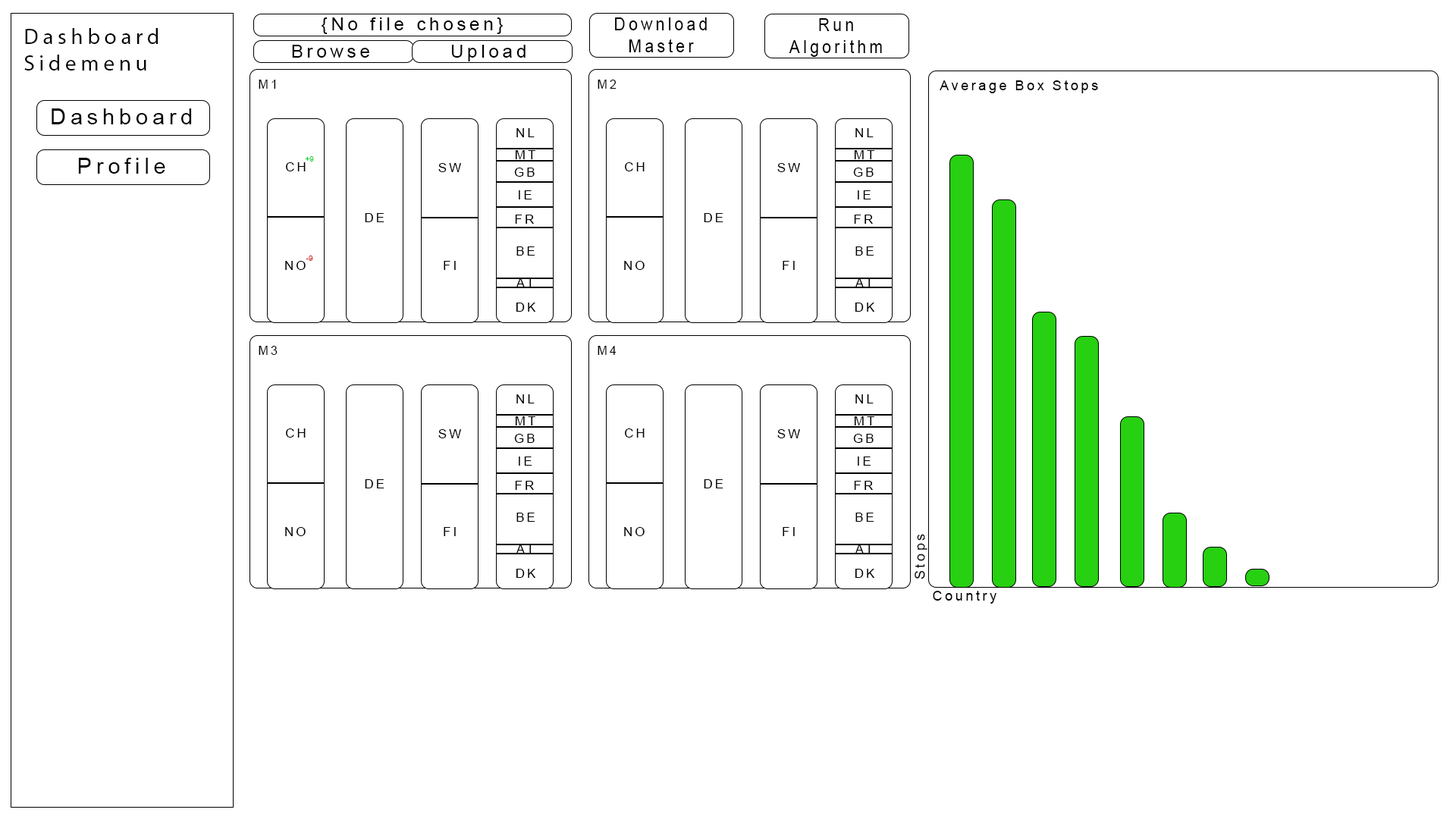
<style>
.page{position:relative;width:1456px;height:819px;background:#ffffff}
.page>*{position:absolute;margin:0}
.t1{font:18.2px "ArialMT";letter-spacing:0.2em;color:#000000}
.t2{font:18.2px "ArialMT";letter-spacing:0.2em;color:#000000;scale:0.88 1}
.t3{font:22px "MyriadPro-Regular";letter-spacing:0.2em;color:#000000}
.t4{font:12.2px "ArialMT";letter-spacing:0.2em;color:#000000}
.t5{font:13.6px "ArialMT";letter-spacing:0.2em;color:#000000}
.t6{font:22px "ArialMT";letter-spacing:0.2em;color:#000000}
.t7{font:12.7px "ArialMT";letter-spacing:0.2em;color:#000000}
.t8{font:7.6px "ArialMT";color:#07d224}
.t9{font:7.6px "ArialMT";color:#d20707}
</style>
<div class="page">
<p class="t1" style="left:322px;top:17px;width:181px;height:17px">{No file chosen}</p>
<p class="t2" style="left:615px;top:17px;width:92px;height:35px;text-align:center">Download<br>Master</p>
<p class="t3" style="left:24px;top:28px;width:134px;height:43px">Dashboard<br>Sidemenu</p>
<p class="t2" style="left:789px;top:18px;width:93px;height:39px;text-align:center">Run<br>Algorithm</p>
<p class="t1" style="left:292px;top:45px;width:77px;height:13px">Browse</p>
<p class="t1" style="left:451px;top:45px;width:75px;height:16px">Upload</p>
<p class="t4" style="left:259px;top:80px;width:17px;height:9px">M1</p>
<p class="t4" style="left:598px;top:80px;width:19px;height:9px">M2</p>
<p class="t5" style="left:940px;top:80px;width:158px;height:13px">Average Box Stops</p>
<p class="t6" style="left:52px;top:108px;width:140px;height:16px">Dashboard</p>
<p class="t7" style="left:516px;top:128px;width:19px;height:9px">NL</p>
<p class="t7" style="left:855px;top:128px;width:19px;height:9px">NL</p>
<p class="t6" style="left:78px;top:158px;width:87px;height:16px">Profile</p>
<p class="t8" style="left:305px;top:156px;width:9px;height:6px">+9</p>
<p class="t7" style="left:515px;top:150px;width:21px;height:9px">MT</p>
<p class="t7" style="left:854px;top:150px;width:21px;height:9px">MT</p>
<p class="t7" style="left:286px;top:162px;width:20px;height:9px">CH</p>
<p class="t7" style="left:438px;top:163px;width:23px;height:9px">SW</p>
<p class="t7" style="left:514px;top:168px;width:21px;height:9px">GB</p>
<p class="t7" style="left:625px;top:162px;width:20px;height:9px">CH</p>
<p class="t7" style="left:777px;top:163px;width:23px;height:9px">SW</p>
<p class="t7" style="left:853px;top:168px;width:21px;height:9px">GB</p>
<p class="t7" style="left:519px;top:190px;width:13px;height:9px">IE</p>
<p class="t7" style="left:858px;top:190px;width:13px;height:9px">IE</p>
<p class="t7" style="left:365px;top:213px;width:19px;height:9px">DE</p>
<p class="t7" style="left:515px;top:215px;width:19px;height:9px">FR</p>
<p class="t7" style="left:704px;top:213px;width:19px;height:9px">DE</p>
<p class="t7" style="left:854px;top:215px;width:19px;height:9px">FR</p>
<p class="t9" style="left:306px;top:256px;width:7px;height:5px">-9</p>
<p class="t7" style="left:516px;top:246px;width:19px;height:10px">BE</p>
<p class="t7" style="left:855px;top:246px;width:19px;height:10px">BE</p>
<p class="t7" style="left:285px;top:261px;width:21px;height:9px">NO</p>
<p class="t7" style="left:444px;top:261px;width:12px;height:9px">FI</p>
<p class="t7" style="left:624px;top:261px;width:21px;height:9px">NO</p>
<p class="t7" style="left:783px;top:261px;width:12px;height:9px">FI</p>
<p class="t7" style="left:516px;top:278px;width:19px;height:9px">AT</p>
<p class="t7" style="left:855px;top:278px;width:19px;height:9px">AT</p>
<p class="t7" style="left:516px;top:303px;width:20px;height:9px">DK</p>
<p class="t7" style="left:855px;top:303px;width:20px;height:9px">DK</p>
<p class="t4" style="left:259px;top:346px;width:19px;height:9px">M3</p>
<p class="t4" style="left:598px;top:346px;width:19px;height:9px">M4</p>
<p class="t7" style="left:516px;top:394px;width:19px;height:9px">NL</p>
<p class="t7" style="left:855px;top:394px;width:19px;height:9px">NL</p>
<p class="t7" style="left:515px;top:416px;width:21px;height:9px">MT</p>
<p class="t7" style="left:854px;top:416px;width:21px;height:9px">MT</p>
<p class="t7" style="left:286px;top:428px;width:20px;height:10px">CH</p>
<p class="t7" style="left:438px;top:429px;width:23px;height:9px">SW</p>
<p class="t7" style="left:514px;top:434px;width:21px;height:9px">GB</p>
<p class="t7" style="left:625px;top:428px;width:20px;height:10px">CH</p>
<p class="t7" style="left:777px;top:429px;width:23px;height:9px">SW</p>
<p class="t7" style="left:853px;top:434px;width:21px;height:9px">GB</p>
<p class="t7" style="left:519px;top:457px;width:13px;height:9px">IE</p>
<p class="t7" style="left:858px;top:457px;width:13px;height:9px">IE</p>
<p class="t7" style="left:365px;top:479px;width:19px;height:9px">DE</p>
<p class="t7" style="left:515px;top:481px;width:19px;height:9px">FR</p>
<p class="t7" style="left:704px;top:479px;width:19px;height:9px">DE</p>
<p class="t7" style="left:854px;top:481px;width:19px;height:9px">FR</p>
<p class="t7" style="left:516px;top:513px;width:19px;height:9px">BE</p>
<p class="t7" style="left:855px;top:513px;width:19px;height:9px">BE</p>
<p class="t7" style="left:285px;top:527px;width:21px;height:9px">NO</p>
<p class="t7" style="left:444px;top:527px;width:12px;height:9px">FI</p>
<p class="t7" style="left:624px;top:527px;width:21px;height:9px">NO</p>
<p class="t7" style="left:783px;top:527px;width:12px;height:9px">FI</p>
<p class="t5" style="left:915px;top:534px;width:12px;height:45px;rotate:-90deg">Stops</p>
<p class="t7" style="left:516px;top:544px;width:19px;height:10px">AT</p>
<p class="t7" style="left:855px;top:544px;width:19px;height:10px">AT</p>
<p class="t7" style="left:516px;top:569px;width:20px;height:9px">DK</p>
<p class="t7" style="left:855px;top:569px;width:20px;height:9px">DK</p>
<p class="t5" style="left:933px;top:591px;width:63px;height:13px">Country</p>
</div>
